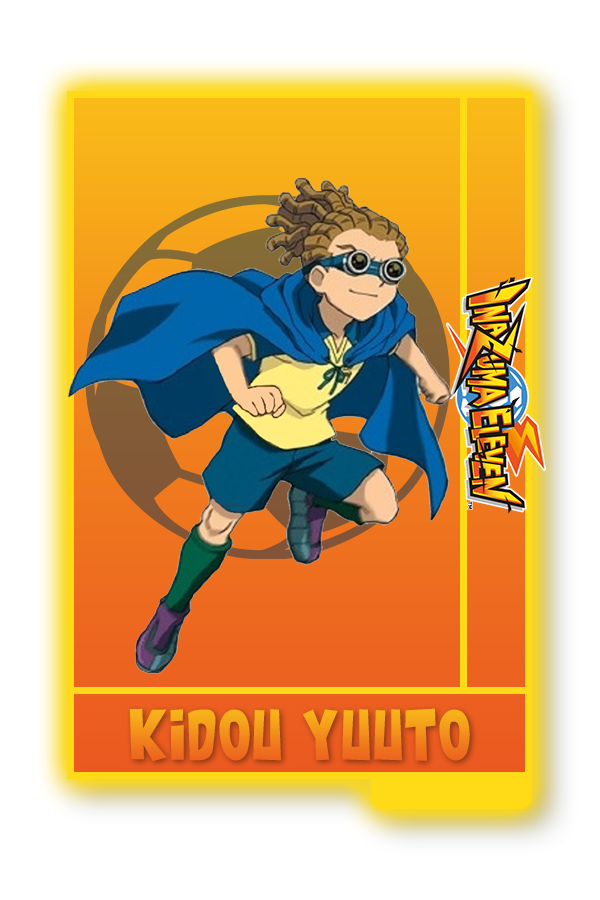
<style>
.page{position:relative;width:600px;height:900px;background:#ffffff}
.page>*{position:absolute;margin:0}
.t1{font:75px "TTG-Bold"}
</style>
<div class="page">
<p class="t1" style="left:129px;top:708px;width:341px;height:54px">Kidou Yuuto</p>
</div>
